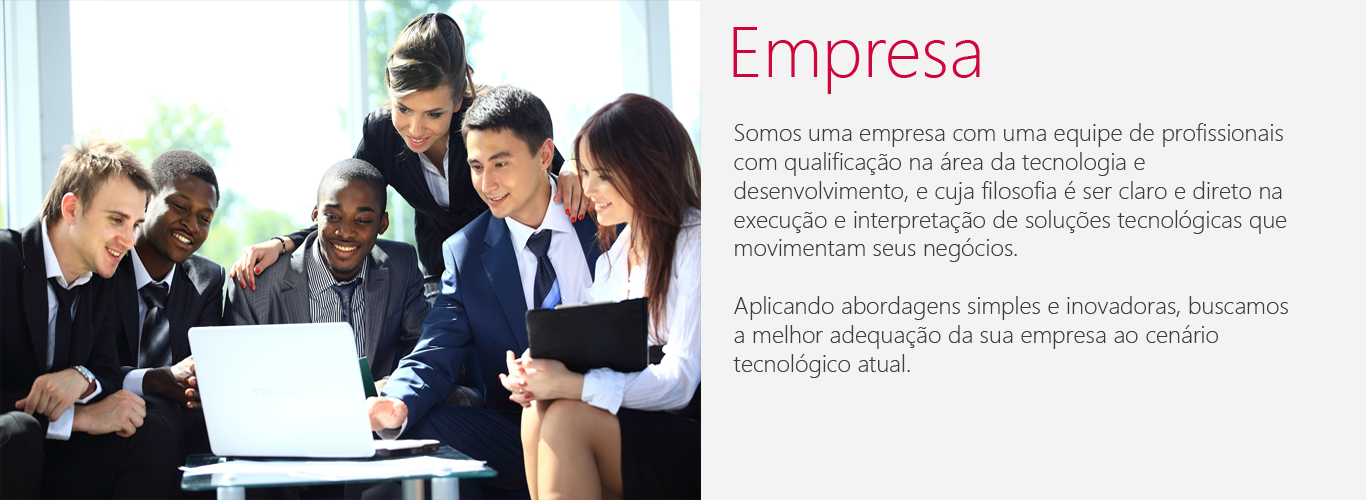
<style>
.page{position:relative;width:1366px;height:500px;background:#f4f3f3}
.page>*{position:absolute;margin:0}
.t1{font:72px "WeblySleekUILight";color:#cf063e}
.t2{font:24px "WeblySleekUILight";color:#3d3d3d}
</style>
<div class="page">
<p class="t1" style="left:733px;top:27px;width:247px;height:67px">Empresa</p>
<p class="t2" style="left:733px;top:123px;width:555px;height:255px">Somos uma empresa com uma equipe de profissionais <br>com qualificação na área da tecnologia e <br>desenvolvimento, e cuja filosofia é ser claro e direto na <br>execução e interpretação de soluções tecnológicas que <br>movimentam seus negócios.  <br><br>Aplicando abordagens simples e inovadoras, buscamos <br>a melhor adequação da sua empresa ao cenário <br>tecnológico atual.</p>
</div>
